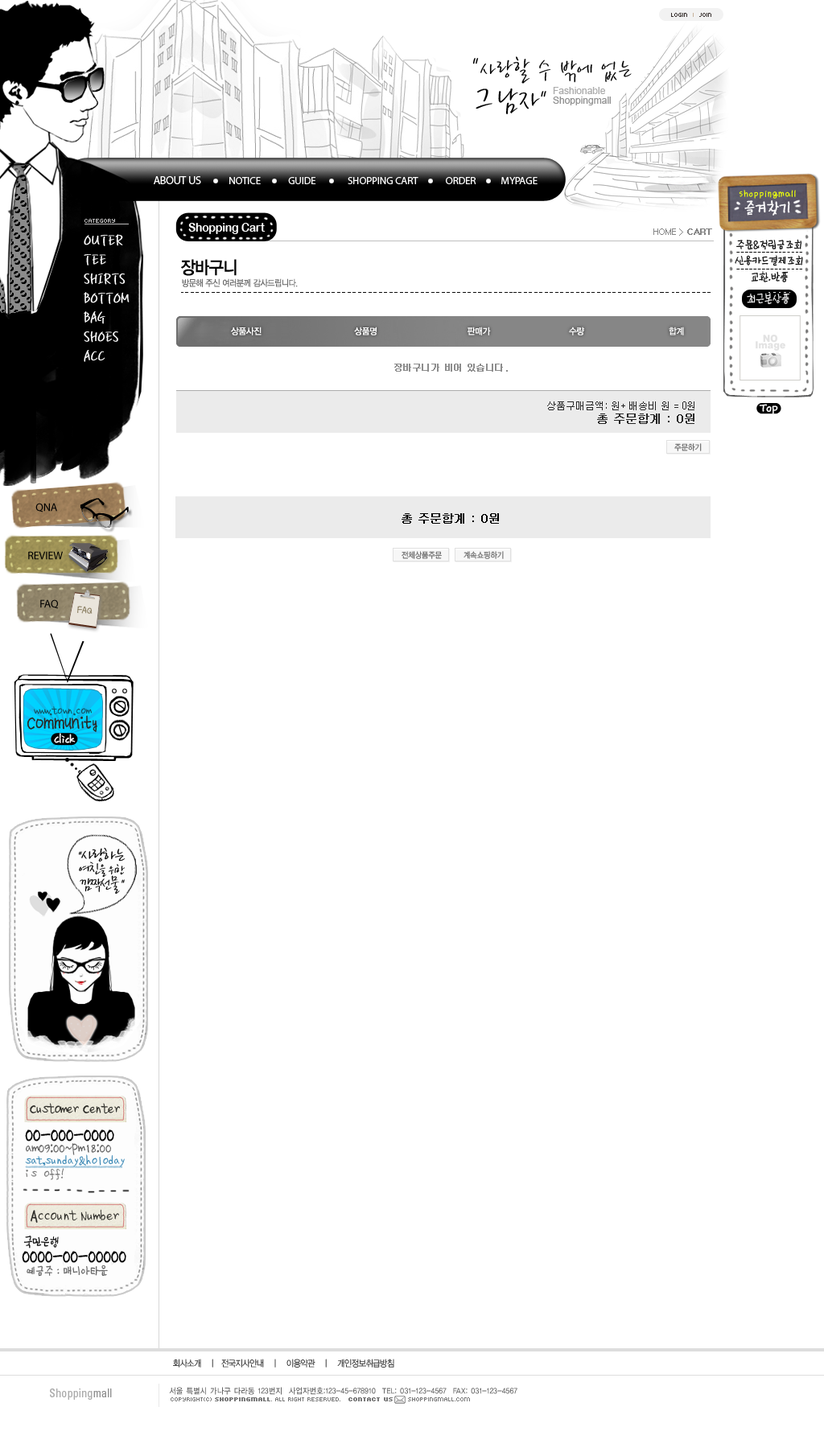
<style>
.page{position:relative;width:824px;height:1448px;background:#ffffff}
.page>*{position:absolute;margin:0}
.t1{font:6.4px "Kroeger0555";color:#362f2d}
.t2{font:6.4px "Kroeger0555";color:#c7b299}
.t3{font:28.2px/11.9px "YDBomnalM";color:#000000;scale:0.85 1}
.t4{font:41.8px/32.8px "YDBomnalM";color:#000000;scale:0.85 1}
.t5{font:36.2px/32.8px "YDBomnalM";color:#000000;scale:0.85 1}
.t6{font:28.2px/32.8px "YDBomnalM";color:#000000;scale:0.85 1}
.t7{font:9.7px/9.5px "ArialMT";color:#909090}
.t8{font:9.7px/9.5px "ArialMT";color:#aaaaaa}
.t9{font:10.5px "MyriadPro-Regular";letter-spacing:-0.01em;color:#ffffff;text-transform:uppercase}
.t10{font:11.3px "MyriadPro-Regular";letter-spacing:-0.01em;color:#ffffff;text-transform:uppercase}
.t11{font:10.5px "YDSDJ";letter-spacing:-0.02em;color:#ebff0a;scale:0.9 1}
.t12{font:6.4px "Kroeger0555";color:#bfbebe;text-decoration:underline}
.t13{font:12.1px "ArialRoundedMTBold";color:#ffffff;scale:0.9 1}
.t14{font:8.8px "Dotum";letter-spacing:-0.08em;color:#858585}
.t15{font:8.8px "Dotum";letter-spacing:-0.08em;color:#858585;font-weight:bold}
.t16{font:19.3px/19.3px "YDBomnalM";color:#ffffff;font-weight:bold;scale:0.85 1}
.t17{font:13.5px/16.1px "YDSDJ";letter-spacing:-0.135em;color:#000000;scale:0.95 1}
.t18{font:17.7px "YDIYGO330";letter-spacing:-0.03em;color:#000000;scale:0.9 1}
.t19{font:8.8px "YDIYGO320";letter-spacing:-0.03em;color:#676767;scale:0.9 1}
.t20{font:13.5px "YDSDJ";letter-spacing:-0.135em;color:#fffefe;scale:0.95 1}
.t21{font:8.8px "YDIYGO330";letter-spacing:-0.015em;color:#ffffff;scale:0.95 1}
.t22{font:8.8px "DotumChe";letter-spacing:-0.14em;color:#8d8d8d;font-weight:bold}
.t23{font:9.7px/13.7px "New-Gulim";color:#272727}
.t24{font:11.3px/13.7px "New-Gulim";color:#272727;font-weight:bold}
.t25{font:11.3px "MyriadPro-Regular";letter-spacing:-0.01em;color:#000000;text-transform:uppercase}
.t26{font:11.3px "New-Gulim";color:#000000;font-weight:bold}
.t27{font:11.3px "YDSDJ";letter-spacing:-0.07em;color:#91856a;font-weight:bold;scale:0.8 1}
.t28{font:10.5px/14.5px "¹ÎÀ±ÈñÃ¼";letter-spacing:-0.02em;color:#125362;font-weight:bold;scale:0.9 1}
.t29{font:16.1px/14.5px "¹Ú¸íÈñÃ¼";letter-spacing:-0.02em;color:#292824;font-weight:bold;scale:0.9 1}
.t30{font:19.3px "¹ÎÀ±ÈñÃ¼";letter-spacing:-0.04em;color:#000000;font-weight:bold;scale:0.8 1}
.t31{font:12.9px "¹ÎÀ±ÈñÃ¼";color:#5d5d5d;scale:0.9 1}
.t32{font:10.9px/12.9px "¹ÎÀ±ÈñÃ¼";color:#3283b2;scale:0.94 1}
.t33{font:10.9px/12.9px "¹ÎÀ±ÈñÃ¼";color:#717171;scale:0.94 1}
.t34{font:14.5px "YDSDJ";letter-spacing:-0.12em;color:#000000;scale:0.9 1}
.t35{font:14.5px "YDSDJ";letter-spacing:-0.12em;color:#5d5d5d;scale:0.9 1}
.t36{font:8.8px "YDIYGO310";letter-spacing:-0.03em;color:#393939;scale:0.9 1}
.t37{font:11.6px "Univers-Condensed";color:#aaaaaa}
.t38{font:11.6px "Univers-Condensed";color:#909090}
.t39{font:8px "YDIYGO130-KSCPC-EUC-H";letter-spacing:-0.05em;color:#666666;scale:0.9 1}
.t40{font:6.4px "Kroeger0555";color:#7a7a7a}
.t41{font:6.4px "Kroeger0555";color:#7a7a7a;font-weight:bold}
</style>
<div class="page">
<p class="t1" style="left:671px;top:13px;width:40px;height:4px">Login  <span class="t2">I</span>  Join</p>
<p class="t3" style="left:472px;top:56px;width:159px;height:58px">"사랑할 수 밖에 없는<br><span class="t4">그</span><span class="t5">남자</span><span class="t6">"</span></p>
<p class="t7" style="left:553px;top:87px;width:57px;height:18px"><span class="t8">Fashionable<br></span>Shoppingmall</p>
<p class="t9" style="left:154px;top:176px;width:383px;height:8px"><span class="t10">about US</span>             Notice             Guide               SHOPPING Cart             Order            Mypage</p>
<p class="t11" style="left:738px;top:190px;width:57px;height:9px">shoppingmall</p>
<p class="t12" style="left:84px;top:219px;width:45px;height:5px">category</p>
<p class="t13" style="left:188px;top:223px;width:77px;height:11px">Shopping Cart</p>
<p class="t14" style="left:653px;top:228px;width:59px;height:8px">HOME &gt; <span class="t15">CART</span></p>
<p class="t16" style="left:84px;top:234px;width:45px;height:128px">OUTER<br>TEE<br>SHIRTS<br>BOTTOM<br>BAG<br>SHOES<br>ACC</p>
<p class="t17" style="left:734px;top:239px;width:69px;height:43px;text-align:center;rotate:-1deg">주문&amp;적립금조회<br>신용카드결제조회<br>교환.반품</p>
<p class="t18" style="left:181px;top:259px;width:55px;height:17px">장바구니</p>
<p class="t19" style="left:182px;top:278px;width:116px;height:9px">방문해 주신 여러분께 감사드립니다.</p>
<p class="t20" style="left:746px;top:293px;width:43px;height:11px;rotate:-1deg">최근본상품</p>
<p class="t21" style="left:231px;top:327px;width:453px;height:8px">상품사진                                 상품명                                판매가                            수량                              합계</p>
<p class="t22" style="left:394px;top:364px;width:114px;height:8px">장바구니가 비어 있습니다.</p>
<p class="t23" style="left:547px;top:401px;width:147px;height:23px;text-align:right">상품구매금액: 원+ 배송비 원 = 0원<br><span class="t24">총 주문합계 : 0원</span></p>
<p class="t25" style="left:35px;top:503px;width:22px;height:9px">QNA</p>
<p class="t26" style="left:401px;top:513px;width:98px;height:11px">총 주문합계 : 0원</p>
<p class="t25" style="left:28px;top:551px;width:35px;height:9px">REVIEW</p>
<p class="t25" style="left:40px;top:599px;width:18px;height:10px">FAQ</p>
<p class="t27" style="left:77px;top:606px;width:15px;height:8px;rotate:6deg">FAQ</p>
<p class="t28" style="left:27px;top:706px;width:70px;height:26px;text-align:center">www.town.com<br><span class="t29">Community</span></p>
<p class="t30" style="left:25px;top:1129px;width:89px;height:12px">00-000-0000</p>
<p class="t31" style="left:26px;top:1143px;width:85px;height:12px">am09:00~pm18:00</p>
<p class="t32" style="left:25px;top:1154px;width:100px;height:26px">sat,sunday&amp;holoday<br><span class="t33">is off!</span></p>
<p class="t34" style="left:23px;top:1235px;width:36px;height:13px">국민은행</p>
<p class="t30" style="left:22px;top:1251px;width:104px;height:12px">0000-00-00000</p>
<p class="t35" style="left:27px;top:1264px;width:81px;height:12px">예금주 : 매니아타운</p>
<p class="t36" style="left:173px;top:1359px;width:221px;height:8px">회사소개    |   전국지사안내    |    이용약관    |    개인정보취급방침</p>
<p class="t37" style="left:50px;top:1388px;width:62px;height:12px">Shopping<span class="t38">mall</span></p>
<p class="t39" style="left:169px;top:1387px;width:348px;height:8px">서울 특별시 가나구 다라동 123번지  사업자번호:123-45-678910  TEL: 031-123-4567  FAX: 031-123-4567</p>
<p class="t40" style="left:171px;top:1397px;width:299px;height:4px">COPYRIGHT(C) <span class="t41">Shoppingmall</span>. ALL RIGHT RESERVED.   <span class="t41">Contact Us   </span>  Shoppingmall.com</p>
</div>
